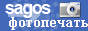
<style>
.page{position:relative;width:88px;height:31px;background:#4269b9}
.page>*{position:absolute;margin:0}
.t1{font:18px "Arial-BoldMT";letter-spacing:-0.08em;color:#ffffff}
.t2{font:14px "TimesNewRomanPS-BoldMT";letter-spacing:0.05em;color:#fbf5f5}
</style>
<div class="page">
<p class="t1" style="left:5px;top:4px;width:46px;height:14px">sagos</p>
<p class="t2" style="left:9px;top:17px;width:79px;height:13px">фотопечать</p>
</div>
